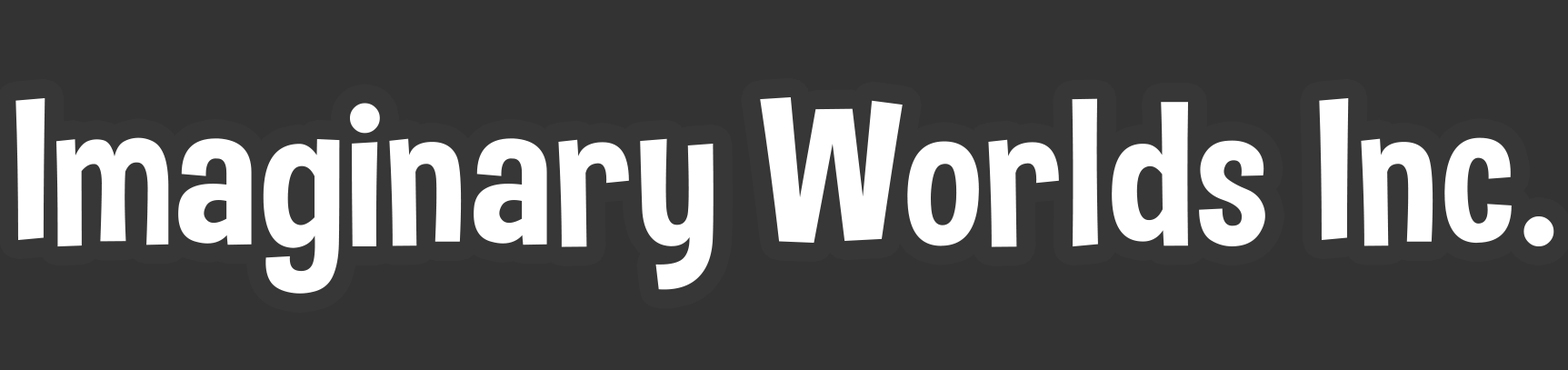
<style>
.page{position:relative;width:1568px;height:370px;background:#333333}
.page>*{position:absolute;margin:0}
.t1{font:208.2px "DimboRegular";letter-spacing:0.02em;color:#ffffff}
</style>
<div class="page">
<p class="t1" style="left:15px;top:97px;width:1539px;height:197px">Imaginary Worlds Inc.</p>
</div>
